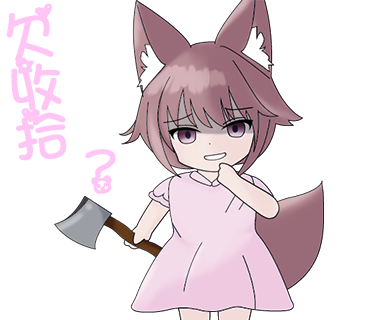
<style>
.page{position:relative;width:370px;height:320px;background:#ffffff}
.page>*{position:absolute;margin:0}
.t1{font:59.2px/51.1px "ARTianniuB5-Bold";color:#ffc6f5;font-weight:bold}
.t2{font:50.8px "ARTianniuB5-Bold";color:#ffc6f5;font-weight:bold}
</style>
<div class="page">
<p class="t1" style="left:6px;top:3px;width:61px;height:158px;rotate:-7deg">欠<br>收<br>拾</p>
<p class="t2" style="left:85px;top:149px;width:31px;height:45px;rotate:-9deg">？</p>
</div>
